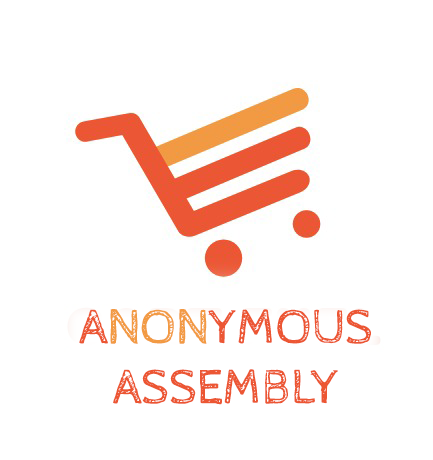
<style>
.page{position:relative;width:433px;height:460px;background:#ffffff}
.page>*{position:absolute;margin:0}
.t1{font:50px "CabinSketch-Regular";color:#ec5633}
.t2{font:50px "CabinSketch-Regular";color:#f29a43}
</style>
<div class="page">
<p class="t1" style="left:79px;top:309px;width:292px;height:96px;text-align:center">A<span class="t2">NON</span>YMOUS ASSEMBLY</p>
</div>
